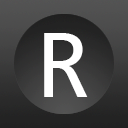
<style>
.page{position:relative;width:128px;height:128px}
.page>*{position:absolute;margin:0}
.t1{font:100px "Consolas";color:#ffffff}
</style>
<div class="page">
<p class="t1" style="left:44px;top:33px;width:44px;height:64px">R</p>
</div>
